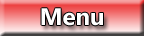
<style>
.page{position:relative;width:144px;height:36px}
.page>*{position:absolute;margin:0}
.t1{font:24px "SegoeUI-Bold";color:#ffffff}
</style>
<div class="page">
<p class="t1" style="left:41px;top:8px;width:62px;height:18px">Menu</p>
</div>
